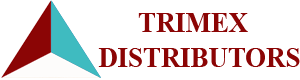
<style>
.page{position:relative;width:300px;height:80px;background:#ffffff}
.page>*{position:absolute;margin:0}
.t1{font:28.7px "TimesNewRomanPS-BoldMT";color:#8b0505;scale:0.93 1}
</style>
<div class="page">
<p class="t1" style="left:98px;top:13px;width:202px;height:54px">TRIMEX<br>DISTRIBUTORS</p>
</div>
